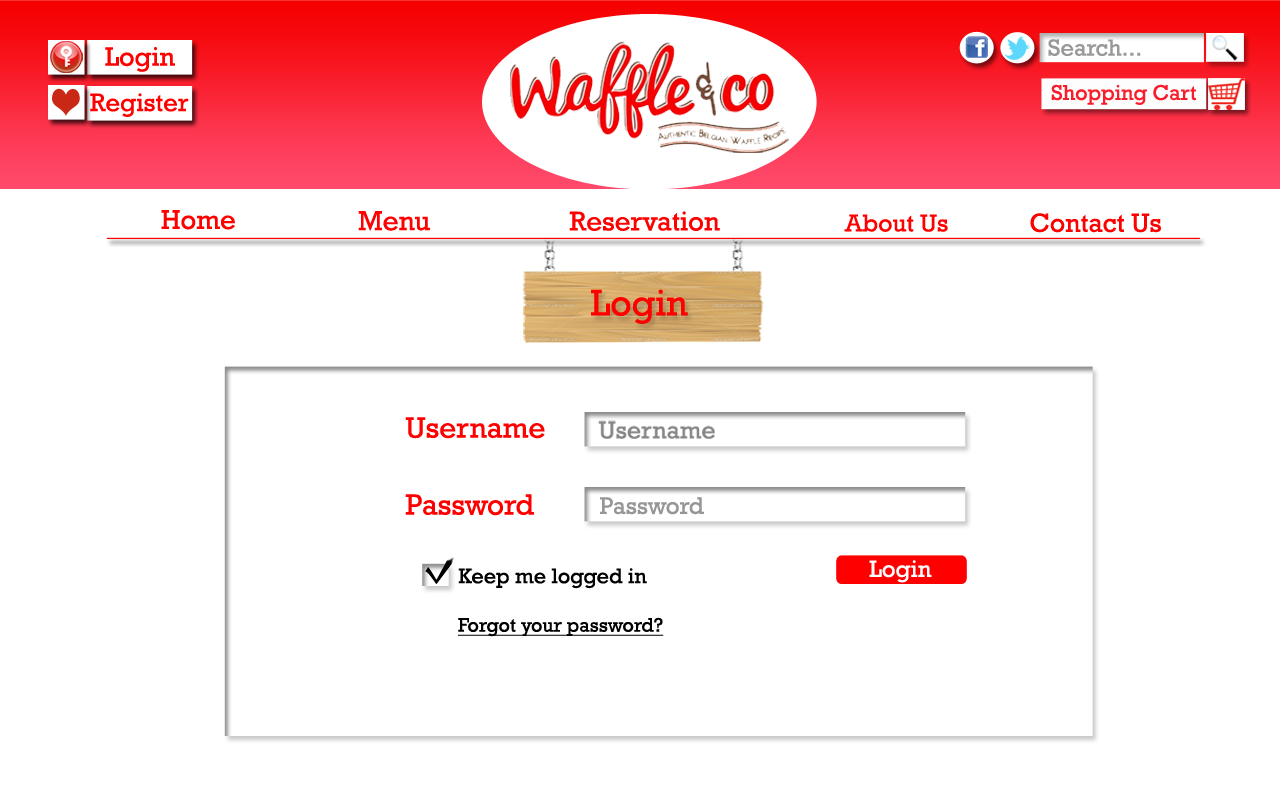
<style>
.page{position:relative;width:1280px;height:800px;background:#ffffff}
.page>*{position:absolute;margin:0}
.t1{font:27.5px "Rockwell";color:#fe0000}
.t2{font:28px "Rockwell";color:#fe0000}
.t3{font:27.6px "Rockwell";color:#fe0000}
.t4{font:24.9px "Rockwell";color:#fe0000}
.t5{font:26.7px "Rockwell";color:#fe0000}
.t6{font:37.6px "Rockwell";color:#fe0000}
.t7{font:29.8px "Rockwell";color:#fe0000}
.t8{font:24.2px "Rockwell";color:#969696}
.t9{font:21.6px "Rockwell";color:#020000}
.t10{font:24px "Rockwell";color:#ffffff}
.t11{font:19.8px "Rockwell";color:#000000;text-decoration:underline}
</style>
<div class="page">
<p class="t1" style="left:161px;top:210px;width:74px;height:20px">Home</p>
<p class="t2" style="left:358px;top:211px;width:72px;height:20px">Menu</p>
<p class="t3" style="left:569px;top:211px;width:151px;height:20px">Reservation</p>
<p class="t4" style="left:844px;top:214px;width:104px;height:18px">About Us</p>
<p class="t5" style="left:1030px;top:213px;width:131px;height:20px">Contact Us</p>
<p class="t6" style="left:591px;top:289px;width:97px;height:35px">Login</p>
<p class="t7" style="left:405px;top:417px;width:140px;height:22px">Username</p>
<p class="t7" style="left:405px;top:494px;width:129px;height:22px">Password</p>
<p class="t8" style="left:600px;top:497px;width:104px;height:18px">Password</p>
<p class="t9" style="left:458px;top:568px;width:189px;height:21px">Keep me logged in</p>
<p class="t10" style="left:869px;top:560px;width:63px;height:23px">Login</p>
<p class="t11" style="left:458px;top:617px;width:206px;height:20px">Forgot your password?</p>
</div>
